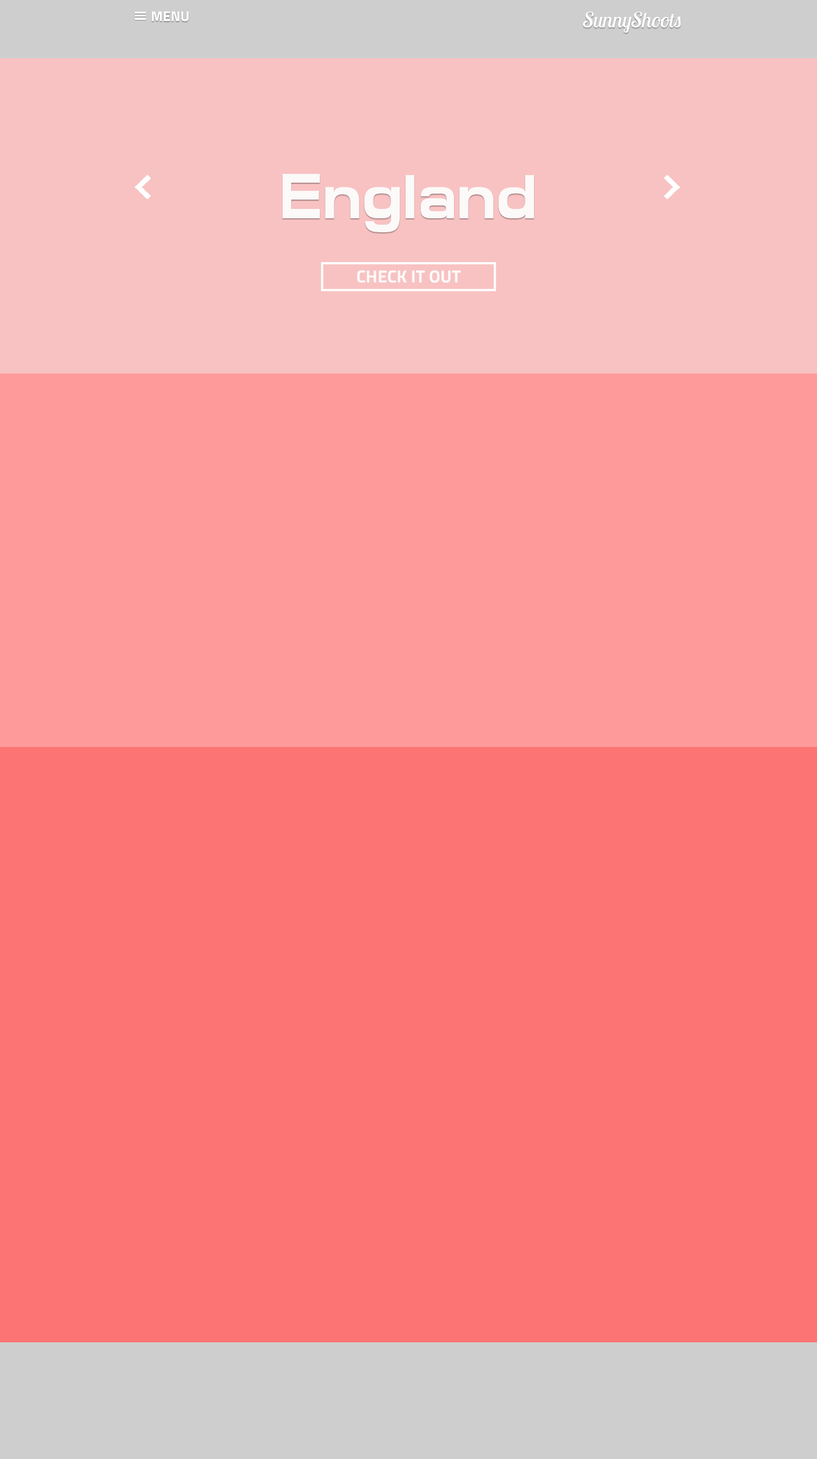
<style>
.page{position:relative;width:817px;height:1459px;background:#fd7474}
.page>*{position:absolute;margin:0}
.t1{font:14px "TitilliumWeb-Bold";color:#ffffff}
.t2{font:21px "LobsterTwo-Italic";color:#ffffff}
.t3{font:63px "MicroExtendFLF-Bold";color:#fcf9f9;scale:0.83 1}
.t4{font:17.5px "TitilliumWeb-Bold";color:#fcf9f9}
</style>
<div class="page">
<p class="t1" style="left:152px;top:11px;width:37px;height:11px">MENU</p>
<p class="t2" style="left:583px;top:12px;width:98px;height:21px">SunnyShoots</p>
<p class="t3" style="left:283px;top:174px;width:251px;height:58px">England</p>
<p class="t4" style="left:357px;top:270px;width:104px;height:13px">CHECK IT OUT</p>
</div>
